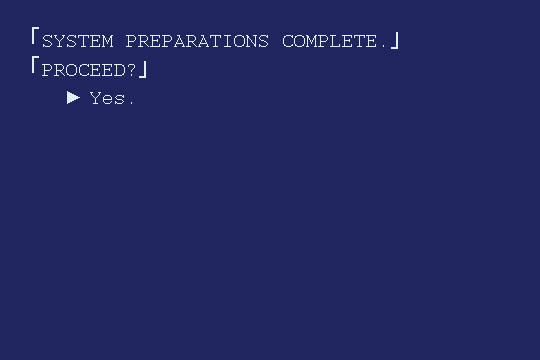
<style>
.page{position:relative;width:540px;height:360px;background:#1e255f}
.page>*{position:absolute;margin:0}
.t1{font:24px "Courier";color:#e2eef5}
.t2{font:24px "MS-Gothic";color:#e2eef5}
.t3{font:18px "TimesNewRomanPSMT";color:#e2eef5}
</style>
<div class="page">
<p class="t1" style="left:32px;top:27px;width:366px;height:51px"><span class="t2">「</span>SYSTEM PREPARATIONS COMPLETE.<span class="t2">」<br>「</span>PROCEED?<span class="t2">」</span></p>
<p class="t1" style="left:67px;top:91px;width:65px;height:13px"><span class="t3">► </span>Yes.</p>
</div>
